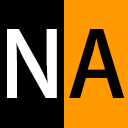
<style>
.page{position:relative;width:128px;height:128px;background:#000000}
.page>*{position:absolute;margin:0}
.t1{font:90px "AdobeHeitiStd-Regular";color:#ffffff}
.t2{font:90px "AdobeHeitiStd-Regular";color:#000000}
</style>
<div class="page">
<p class="t1" style="left:7px;top:29px;width:50px;height:69px">N</p>
<p class="t2" style="left:69px;top:29px;width:56px;height:69px">A</p>
</div>
